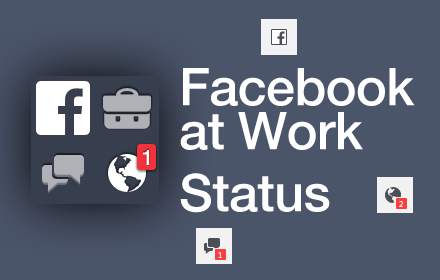
<style>
.page{position:relative;width:440px;height:280px;background:#4b556a}
.page>*{position:absolute;margin:0}
.t1{font:52px "HelveticaNeueLT-Medium";letter-spacing:-0.01em;color:#ffffff}
</style>
<div class="page">
<p class="t1" style="left:180px;top:68px;width:235px;height:82px">Facebook at Work</p>
<p class="t1" style="left:180px;top:173px;width:150px;height:40px">Status</p>
</div>
